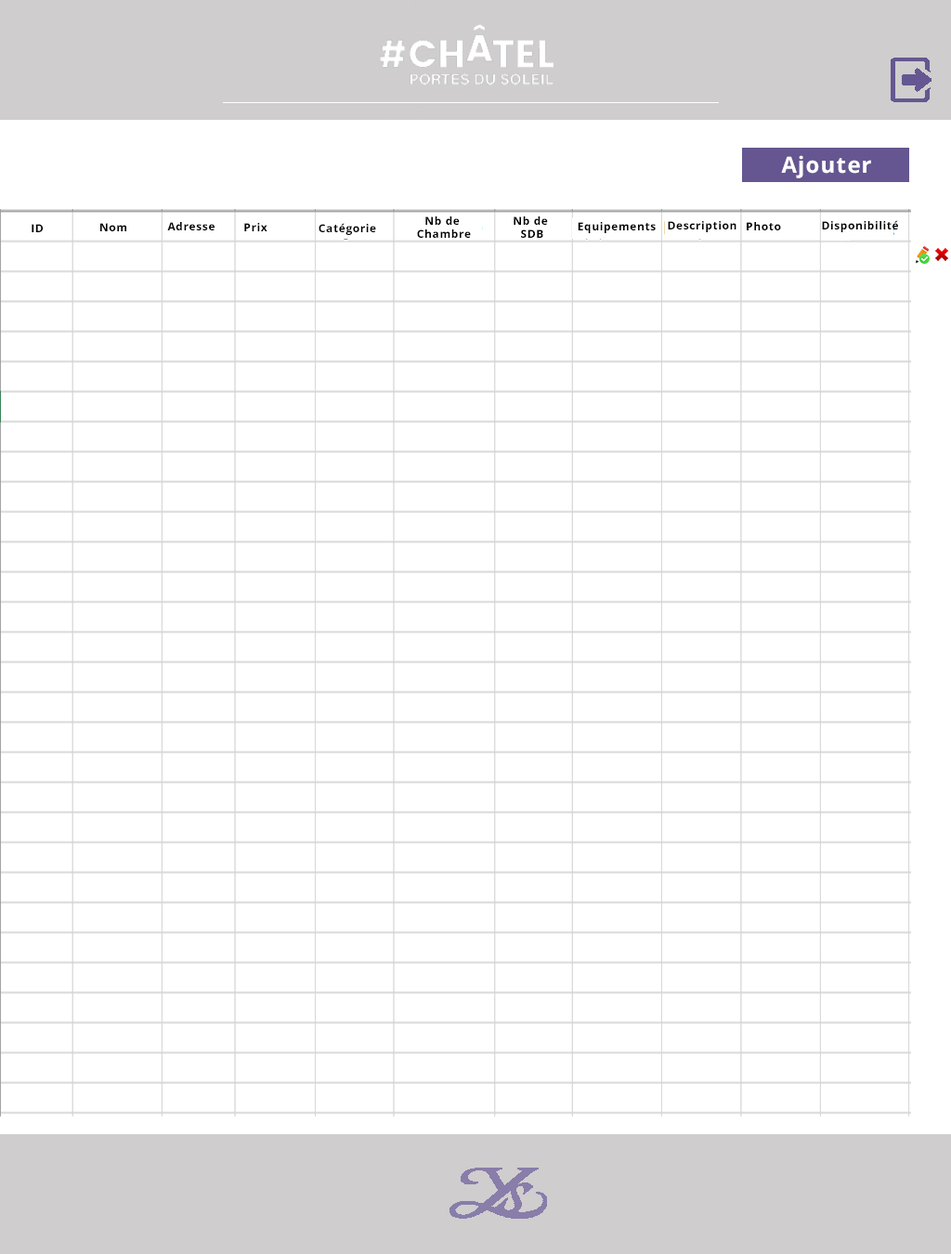
<style>
.page{position:relative;width:951px;height:1254px;background:#ffffff}
.page>*{position:absolute;margin:0}
.t1{font:22.3px "OpenSans-Bold";letter-spacing:0.05em;color:#ffffff}
.t2{font:11.1px "OpenSans-Bold";letter-spacing:0.05em;color:#000000}
</style>
<div class="page">
<p class="t1" style="left:781px;top:155px;width:90px;height:23px">Ajouter</p>
<p class="t2" style="left:167px;top:222px;width:48px;height:8px">Adresse</p>
<p class="t2" style="left:417px;top:216px;width:54px;height:22px;text-align:center">Nb de <br>Chambre</p>
<p class="t2" style="left:514px;top:216px;width:34px;height:22px;text-align:center">Nb de <br>SDB</p>
<p class="t2" style="left:578px;top:222px;width:78px;height:11px">Equipements</p>
<p class="t2" style="left:668px;top:221px;width:69px;height:11px">Description</p>
<p class="t2" style="left:747px;top:222px;width:34px;height:8px">Photo</p>
<p class="t2" style="left:822px;top:220px;width:76px;height:12px">Disponibilité</p>
<p class="t2" style="left:32px;top:224px;width:11px;height:8px">ID</p>
<p class="t2" style="left:100px;top:223px;width:26px;height:8px">Nom</p>
<p class="t2" style="left:244px;top:223px;width:23px;height:8px">Prix</p>
<p class="t2" style="left:319px;top:223px;width:57px;height:12px">Catégorie</p>
</div>
